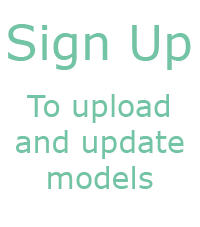
<style>
.page{position:relative;width:200px;height:227px;background:#ffffff}
.page>*{position:absolute;margin:0}
.t1{font:48px "Verdana";color:#73c4a5}
.t2{font:30px "Verdana";color:#73c4a5}
</style>
<div class="page">
<p class="t1" style="left:8px;top:24px;width:183px;height:46px">Sign Up</p>
<p class="t2" style="left:16px;top:94px;width:168px;height:95px;text-align:center">To upload and update models</p>
</div>
